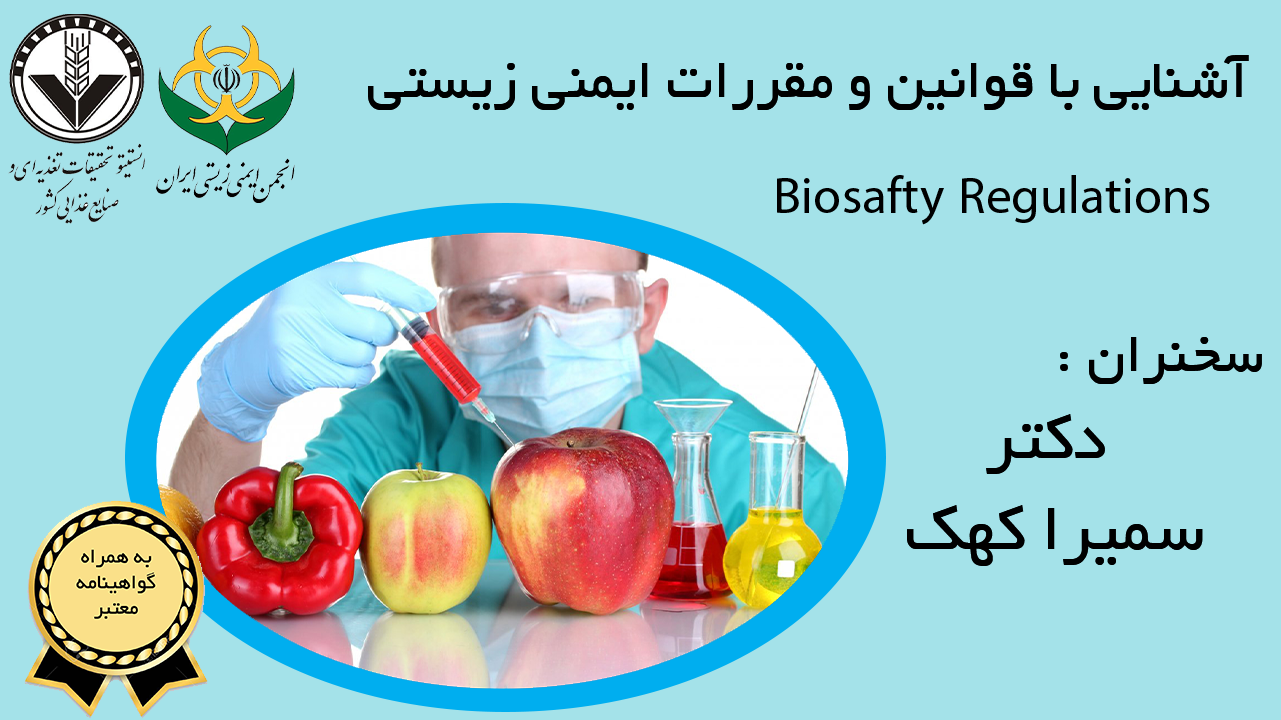
<style>
.page{position:relative;width:1281px;height:720px;background:#a4e2e9}
.page>*{position:absolute;margin:0}
.t1{font:60px "Sp_Soroosh";color:#000000}
.t2{font:72px "MyriadArabic-Regular";color:#000000}
.t3{font:72px/8.3px "Sp_Soroosh";color:#000000}
</style>
<div class="page">
<p class="t1" style="left:368px;top:55px;width:881px;height:55px">آشنایی با قوانین و مقررات ایمنی زیستی</p>
<p class="t2" style="left:777px;top:175px;width:433px;height:50px">Biosafty Regulations</p>
<p class="t1" style="left:1060px;top:337px;width:202px;height:47px">: سخنران</p>
<p class="t3" style="left:907px;top:414px;width:296px;height:152px;text-align:center">دکتر<br><br><br><br><br><br><br><br><br><br><br> سمیرا کهک</p>
</div>
